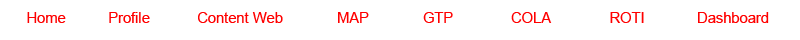
<style>
.page{position:relative;width:800px;height:40px;background:#ffffff}
.page>*{position:absolute;margin:0}
.t1{font:14.7px "ArialMT";color:#fe0000}
.t2{font:14.7px "ArialMT";color:#ff0000}
</style>
<div class="page">
<p class="t1" style="left:27px;top:12px;width:39px;height:11px">Home</p>
<p class="t2" style="left:109px;top:12px;width:41px;height:11px">Profile</p>
<p class="t2" style="left:198px;top:12px;width:85px;height:11px">Content Web</p>
<p class="t2" style="left:338px;top:12px;width:31px;height:11px">MAP</p>
<p class="t2" style="left:423px;top:12px;width:30px;height:11px">GTP</p>
<p class="t2" style="left:511px;top:12px;width:41px;height:11px">COLA</p>
<p class="t2" style="left:610px;top:12px;width:34px;height:11px">ROTI</p>
<p class="t2" style="left:698px;top:12px;width:71px;height:11px">Dashboard</p>
</div>
